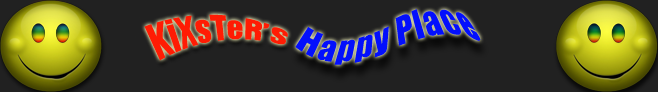
<style>
.page{position:relative;width:658px;height:92px;background:#212121}
.page>*{position:absolute;margin:0}
.t1{font:30px "Impact";color:#ff1c04}
.t2{font:37.8px "Impact";color:#ff1c04}
.t3{font:36px "Impact";color:#030ffd}
</style>
<div class="page">
<p class="t1" style="left:144px;top:14px;width:144px;height:47px">KiXsTeR’<span class="t2">s</span></p>
<p class="t3" style="left:295px;top:9px;width:186px;height:56px">Happy Place</p>
</div>
